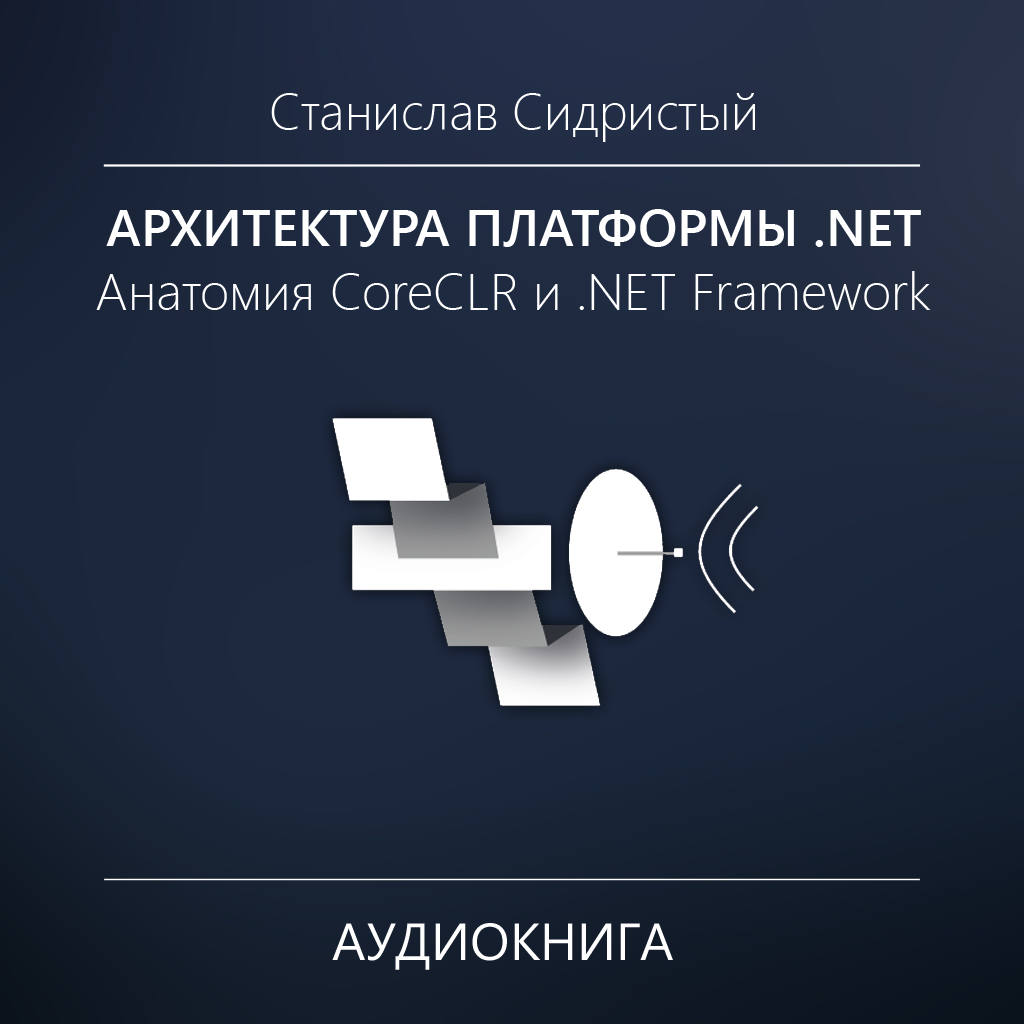
<style>
.page{position:relative;width:1024px;height:1024px}
.page>*{position:absolute;margin:0}
.t1{font:51px "SegoeUI-Light";color:#ffffff}
.t2{font:52px "SegoeUI-SemiBold";color:#ffffff}
.t3{font:52px "SegoeUI-Light";color:#ffffff}
.t4{font:52px "SegoeUI";color:#ffffff}
</style>
<div class="page">
<p class="t1" style="left:271px;top:93px;width:484px;height:49px">Станислав Сидристый</p>
<p class="t2" style="left:106px;top:209px;width:815px;height:38px">АРХИТЕКТУРА ПЛАТФОРМЫ .NET</p>
<p class="t3" style="left:96px;top:271px;width:835px;height:39px">Анатомия CoreCLR и .NET Framework</p>
<p class="t4" style="left:332px;top:923px;width:341px;height:47px">АУДИОКНИГА</p>
</div>
